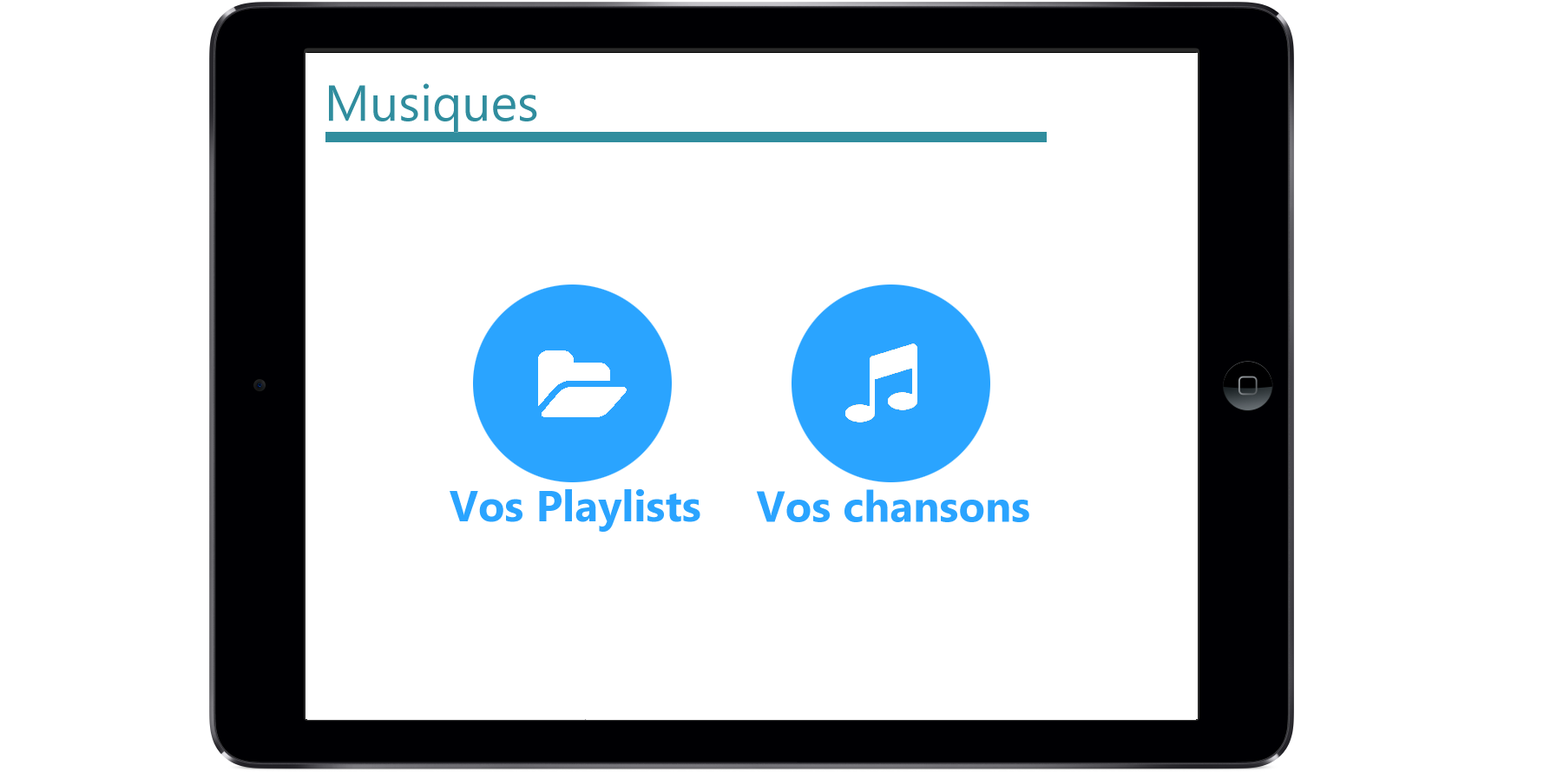
<style>
.page{position:relative;width:1544px;height:772px;background:#ffffff}
.page>*{position:absolute;margin:0}
.t1{font:43.4px "NirmalaUI-Bold";color:#2aa4ff}
</style>
<div class="page">
<p class="t1" style="left:450px;top:489px;width:250px;height:43px">Vos Playlists</p>
<p class="t1" style="left:756px;top:489px;width:273px;height:33px">Vos chansons</p>
</div>
